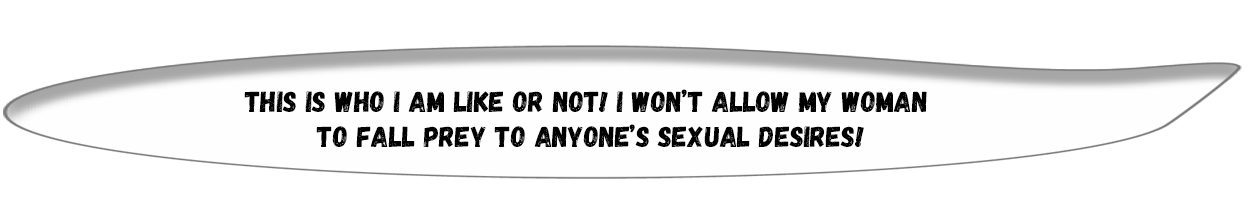
<style>
.page{position:relative;width:1252px;height:223px;background:#ffffff}
.page>*{position:absolute;margin:0}
.t1{font:29.3px "Gagalin-Regular";color:#000000}
</style>
<div class="page">
<p class="t1" style="left:244px;top:89px;width:683px;height:58px;text-align:center">This is who I am like or not! I won’t allow my woman <br>to fall prey to anyone’s sexual desires!</p>
</div>
